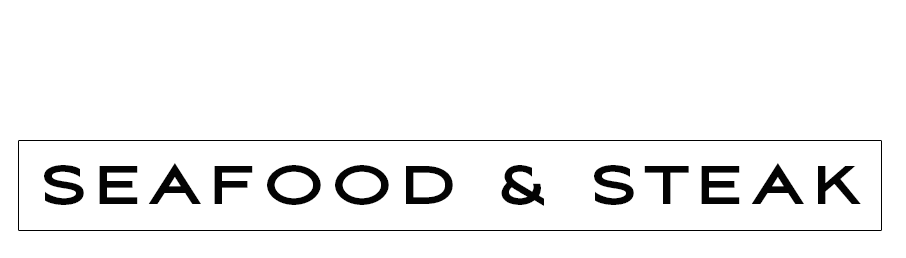
<style>
.page{position:relative;width:906px;height:258px;background:#ffffff}
.page>*{position:absolute;margin:0}
.t1{font:68px "AvianoSansBold";letter-spacing:0.105em;color:#030303;text-transform:uppercase}
</style>
<div class="page">
<p class="t1" style="left:44px;top:163px;width:817px;height:43px">seafood &amp; Steak</p>
</div>
